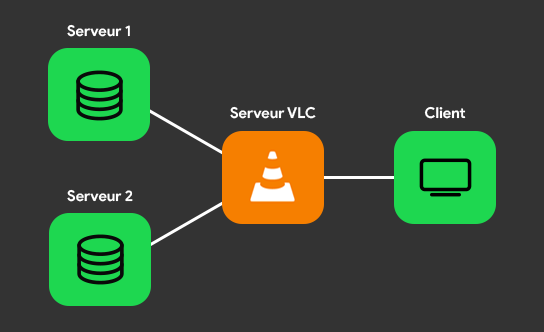
<style>
.page{position:relative;width:544px;height:332px;background:#333333}
.page>*{position:absolute;margin:0}
.t1{font:15px "ProductSans-Bold";color:#ffffff}
.t2{font:14.9px "ProductSans-Bold";color:#ffffff}
</style>
<div class="page">
<p class="t1" style="left:67px;top:24px;width:63px;height:13px">Serveur 1</p>
<p class="t2" style="left:230px;top:106px;width:86px;height:13px">Serveur VLC</p>
<p class="t2" style="left:424px;top:106px;width:42px;height:13px">Client</p>
<p class="t2" style="left:67px;top:189px;width:66px;height:13px">Serveur 2</p>
</div>
